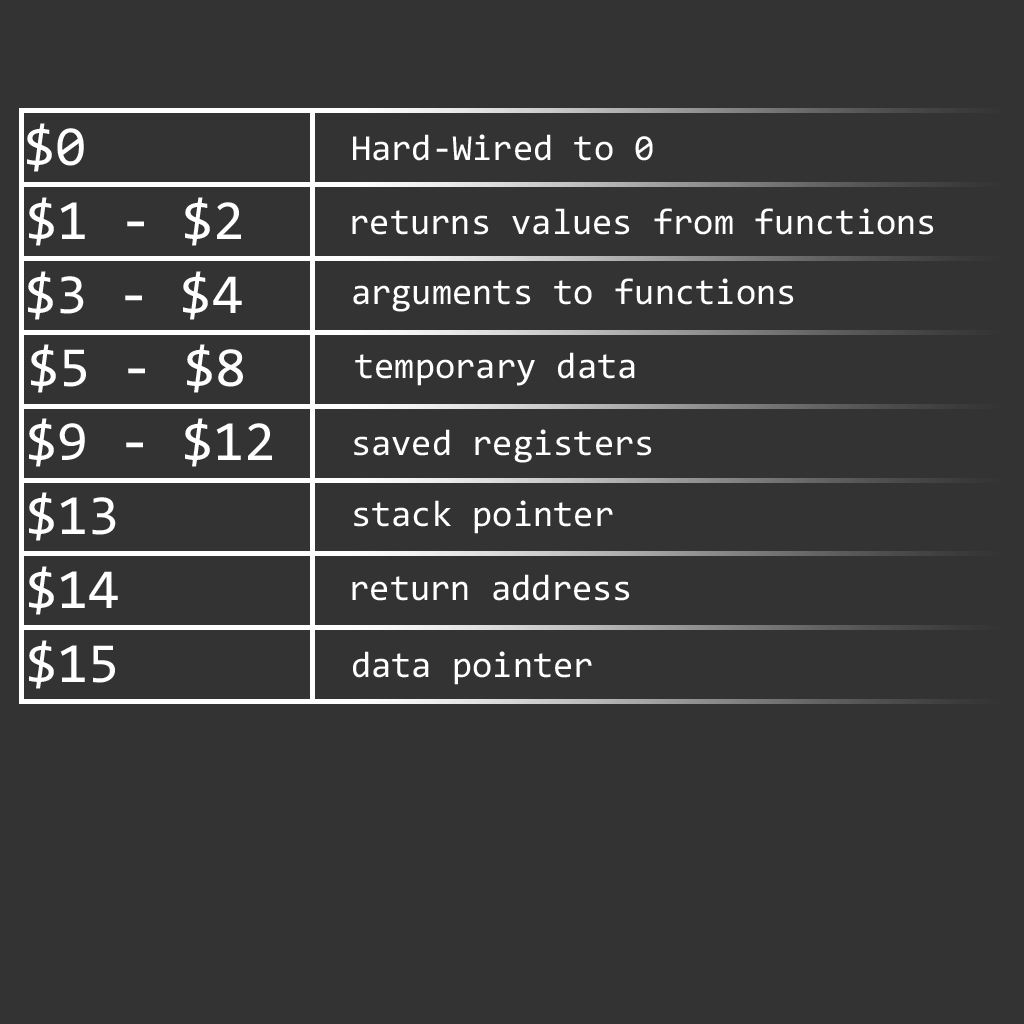
<style>
.page{position:relative;width:1024px;height:1024px;background:#333333}
.page>*{position:absolute;margin:0}
.t1{font:56.7px "Consolas";color:#ffffff}
.t2{font:36.8px "Consolas";color:#ffffff}
</style>
<div class="page">
<p class="t1" style="left:27px;top:123px;width:57px;height:49px">$0</p>
<p class="t2" style="left:353px;top:134px;width:300px;height:27px">Hard-Wired to 0</p>
<p class="t1" style="left:29px;top:197px;width:212px;height:49px">$1 - $2</p>
<p class="t2" style="left:352px;top:208px;width:582px;height:27px">returns values from functions</p>
<p class="t1" style="left:28px;top:271px;width:214px;height:49px">$3 - $4</p>
<p class="t2" style="left:353px;top:278px;width:441px;height:34px">arguments to functions</p>
<p class="t1" style="left:31px;top:344px;width:212px;height:49px">$5 - $8</p>
<p class="t2" style="left:355px;top:352px;width:280px;height:34px">temporary data</p>
<p class="t1" style="left:29px;top:418px;width:243px;height:49px">$9 - $12</p>
<p class="t2" style="left:354px;top:429px;width:298px;height:34px">saved registers</p>
<p class="t1" style="left:29px;top:492px;width:87px;height:49px">$13</p>
<p class="t2" style="left:354px;top:500px;width:259px;height:34px">stack pointer</p>
<p class="t1" style="left:29px;top:566px;width:89px;height:49px">$14</p>
<p class="t2" style="left:352px;top:574px;width:278px;height:27px">return address</p>
<p class="t1" style="left:29px;top:640px;width:86px;height:49px">$15</p>
<p class="t2" style="left:353px;top:651px;width:239px;height:34px">data pointer</p>
</div>
